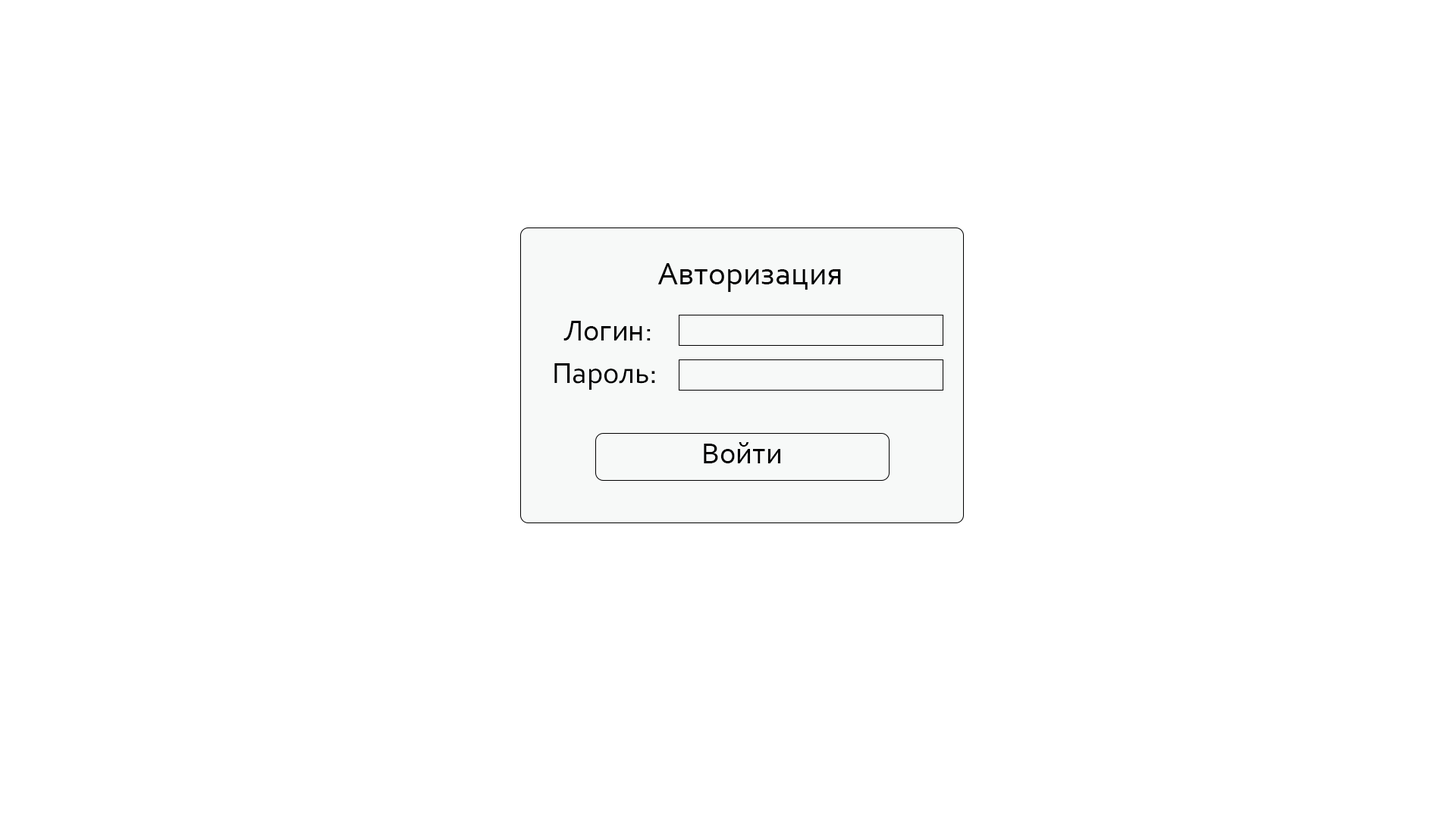
<style>
.page{position:relative;width:1456px;height:819px;background:#ffffff}
.page>*{position:absolute;margin:0}
.t1{font:32.6px "Corbel";color:#000000}
.t2{font:30.3px "Corbel";color:#000000}
.t3{font:30.2px "Corbel";color:#000000}
</style>
<div class="page">
<p class="t1" style="left:657px;top:263px;width:184px;height:29px">Авторизация</p>
<p class="t2" style="left:563px;top:321px;width:88px;height:19px">Логин:</p>
<p class="t3" style="left:554px;top:363px;width:101px;height:27px">Пароль:</p>
<p class="t2" style="left:704px;top:442px;width:76px;height:21px">Войти</p>
</div>
